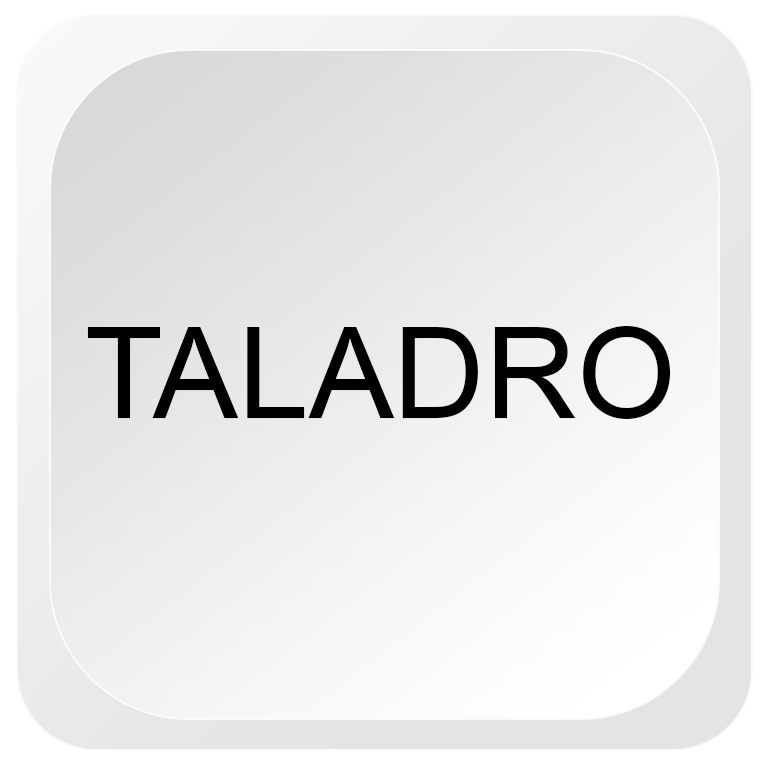
<style>
.page{position:relative;width:768px;height:768px}
.page>*{position:absolute;margin:0}
.t1{font:127px "ArialMT";color:#000000}
</style>
<div class="page">
<p class="t1" style="left:87px;top:326px;width:584px;height:93px">TALADRO</p>
</div>
